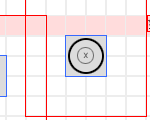
<style>
.page{position:relative;width:150px;height:120px;background:#ffffff}
.page>*{position:absolute;margin:0}
.t1{font:10px "ArialMT";color:#6b6b6b}
</style>
<div class="page">
<p class="t1" style="left:83px;top:52px;width:5px;height:6px">x</p>
</div>
